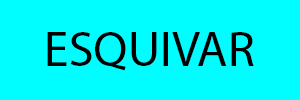
<style>
.page{position:relative;width:300px;height:100px;background:#00fdff}
.page>*{position:absolute;margin:0}
.t1{font:50px "MyriadPro-Regular";color:#000000}
</style>
<div class="page">
<p class="t1" style="left:47px;top:32px;width:207px;height:39px">ESQUIVAR</p>
</div>
